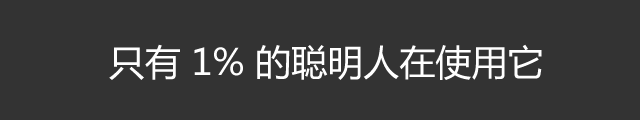
<style>
.page{position:relative;width:640px;height:120px;background:#333333}
.page>*{position:absolute;margin:0}
.t1{font:36px "MicrosoftYaHei";color:#ffffff}
</style>
<div class="page">
<p class="t1" style="left:109px;top:44px;width:433px;height:36px">只有 1% 的聪明人在使用它</p>
</div>
